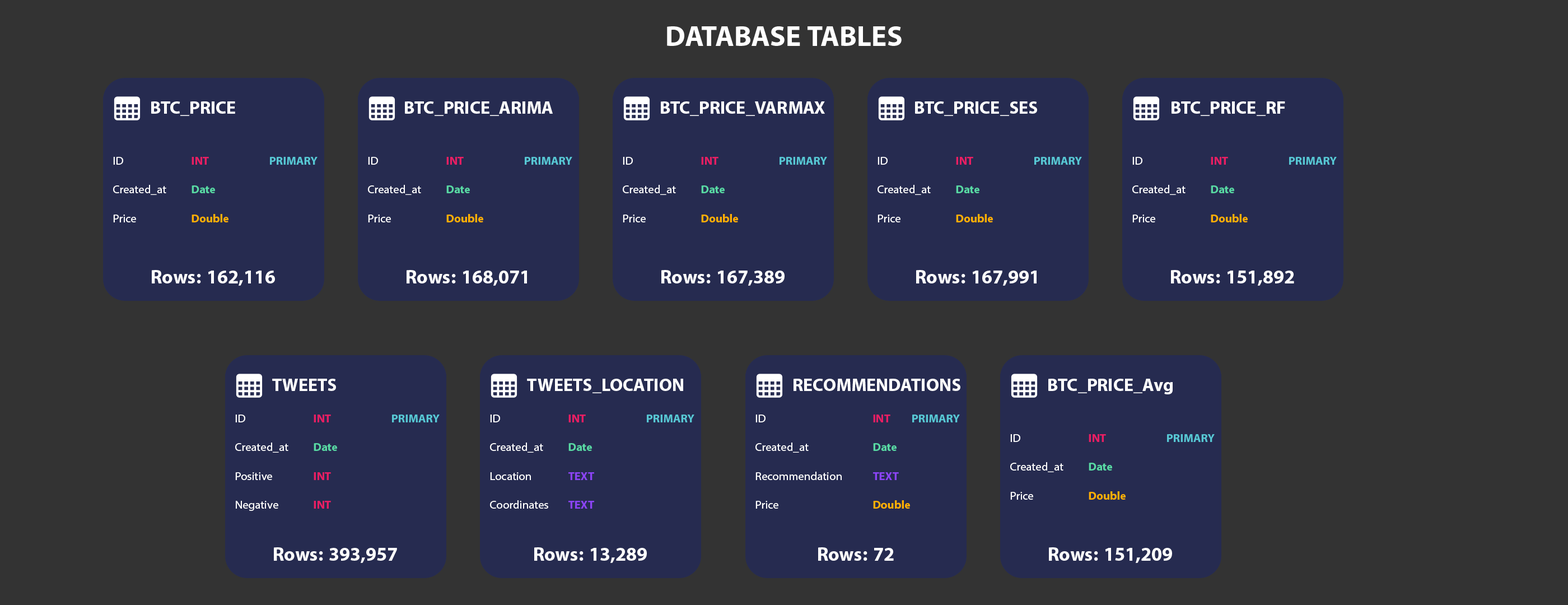
<style>
.page{position:relative;width:1568px;height:605px;background:#333333}
.page>*{position:absolute;margin:0}
.t1{font:40.3px "MyriadArabic-Bold";color:#ffffff}
.t2{font:25.2px "MyriadArabic-Bold";color:#ffffff}
.t3{font:16.3px/28.7px "MyriadArabic-Regular";color:#ffffff}
.t4{font:16.3px/28.7px "MyriadArabic-Bold";color:#e91e63}
.t5{font:16.3px/28.7px "MyriadArabic-Bold";color:#57c7d4}
.t6{font:16.3px/28.7px "MyriadArabic-Bold";color:#58d8a3}
.t7{font:16.3px/28.7px "MyriadArabic-Bold";color:#ffaf00}
.t8{font:26.9px "MyriadArabic-Bold";color:#ffffff}
.t9{font:16.3px/28.7px "MyriadArabic-Bold";color:#8b44f6}
</style>
<div class="page">
<p class="t1" style="left:667px;top:26px;width:235px;height:20px">DATABASE TABLES</p>
<p class="t2" style="left:151px;top:101px;width:84px;height:15px">BTC_PRICE</p>
<p class="t2" style="left:405px;top:101px;width:148px;height:15px">BTC_PRICE_ARIMA</p>
<p class="t2" style="left:661px;top:101px;width:164px;height:15px">BTC_PRICE_VARMAX</p>
<p class="t2" style="left:915px;top:101px;width:122px;height:15px">BTC_PRICE_SES</p>
<p class="t2" style="left:1172px;top:101px;width:113px;height:15px">BTC_PRICE_RF</p>
<p class="t3" style="left:113px;top:157px;width:205px;height:65px">ID    <span class="t4">INT    </span><span class="t5">PRIMARY<br></span>Created_at  <span class="t6">Date<br></span>Price   <span class="t7">Double</span></p>
<p class="t3" style="left:368px;top:157px;width:204px;height:65px">ID    <span class="t4">INT    </span><span class="t5">PRIMARY<br></span>Created_at  <span class="t6">Date<br></span>Price   <span class="t7">Double</span></p>
<p class="t3" style="left:623px;top:157px;width:204px;height:65px">ID    <span class="t4">INT    </span><span class="t5">PRIMARY<br></span>Created_at  <span class="t6">Date<br></span>Price   <span class="t7">Double</span></p>
<p class="t3" style="left:878px;top:157px;width:204px;height:65px">ID    <span class="t4">INT    </span><span class="t5">PRIMARY<br></span>Created_at  <span class="t6">Date<br></span>Price   <span class="t7">Double</span></p>
<p class="t3" style="left:1132px;top:157px;width:205px;height:65px">ID    <span class="t4">INT    </span><span class="t5">PRIMARY<br></span>Created_at  <span class="t6">Date<br></span>Price   <span class="t7">Double</span></p>
<p class="t8" style="left:152px;top:270px;width:123px;height:16px">Rows: 162,116</p>
<p class="t8" style="left:407px;top:270px;width:120px;height:16px">Rows: 168,071</p>
<p class="t8" style="left:661px;top:270px;width:124px;height:16px">Rows: 167,389</p>
<p class="t8" style="left:916px;top:270px;width:121px;height:16px">Rows: 167,991</p>
<p class="t8" style="left:1171px;top:270px;width:123px;height:16px">Rows: 151,892</p>
<p class="t2" style="left:272px;top:379px;width:64px;height:12px">TWEETS</p>
<p class="t2" style="left:527px;top:379px;width:156px;height:14px">TWEETS_LOCATION</p>
<p class="t2" style="left:794px;top:379px;width:166px;height:12px">RECOMMENDATIONS</p>
<p class="t2" style="left:1048px;top:379px;width:125px;height:15px">BTC_PRICE_Avg</p>
<p class="t3" style="left:235px;top:414px;width:205px;height:97px">ID    <span class="t4">INT    </span><span class="t5">PRIMARY<br></span>Created_at  <span class="t6">Date<br></span>Positive   <span class="t4">INT<br></span>Negative  <span class="t4">INT</span></p>
<p class="t3" style="left:490px;top:414px;width:204px;height:94px">ID    <span class="t4">INT    </span><span class="t5">PRIMARY<br></span>Created_at  <span class="t6">Date<br></span>Location  <span class="t9">TEXT<br></span>Coordinates <span class="t9"> TEXT</span></p>
<p class="t3" style="left:755px;top:414px;width:205px;height:94px">ID      <span class="t4">INT  </span><span class="t5">PRIMARY<br></span>Created_at    <span class="t6">Date<br></span>Recommendation  <span class="t9">TEXT<br></span>Price     <span class="t7">Double</span></p>
<p class="t3" style="left:1010px;top:434px;width:205px;height:66px">ID    <span class="t4">INT    </span><span class="t5">PRIMARY<br></span>Created_at  <span class="t6">Date<br></span>Price   <span class="t7">Double</span></p>
<p class="t8" style="left:274px;top:547px;width:123px;height:16px">Rows: 393,957</p>
<p class="t8" style="left:534px;top:547px;width:113px;height:16px">Rows: 13,289</p>
<p class="t8" style="left:818px;top:547px;width:76px;height:14px">Rows: 72</p>
<p class="t8" style="left:1049px;top:547px;width:123px;height:16px">Rows: 151,209</p>
</div>
